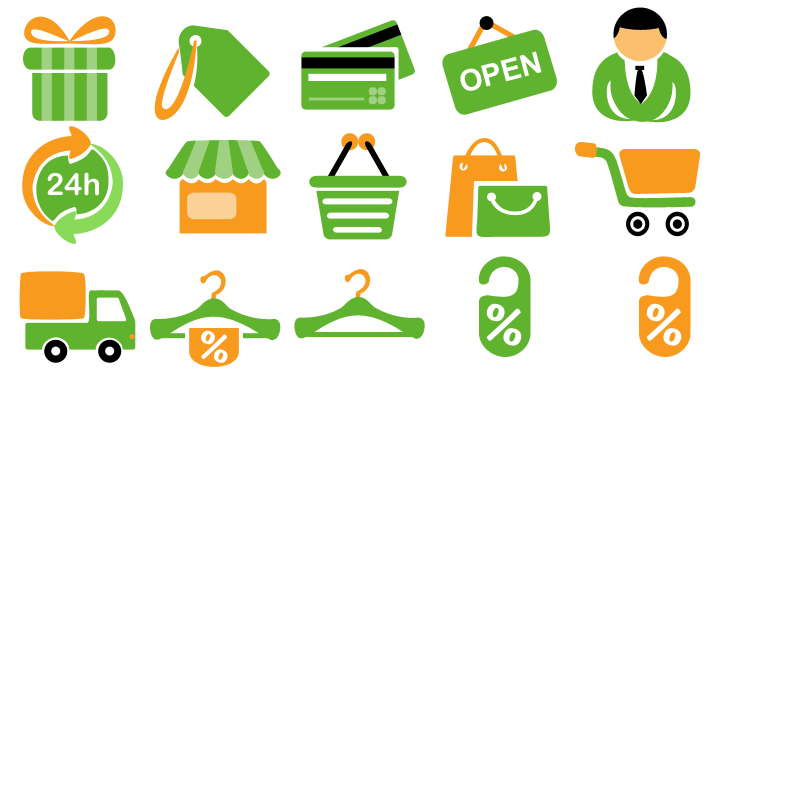
<style>
.page{position:relative;width:800px;height:800px;background:#ffffff}
.page>*{position:absolute;margin:0}
.t1{font:29.8px "Arial-BoldMT";color:#ffffff;text-transform:uppercase}
.t2{font:30.5px "ArialRoundedMTBold";letter-spacing:0.005em;color:#ffffff}
</style>
<div class="page">
<p class="t1" style="left:460px;top:51px;width:82px;height:40px;rotate:-15deg">OPEN</p>
<p class="t2" style="left:47px;top:172px;width:52px;height:24px">24h</p>
</div>
